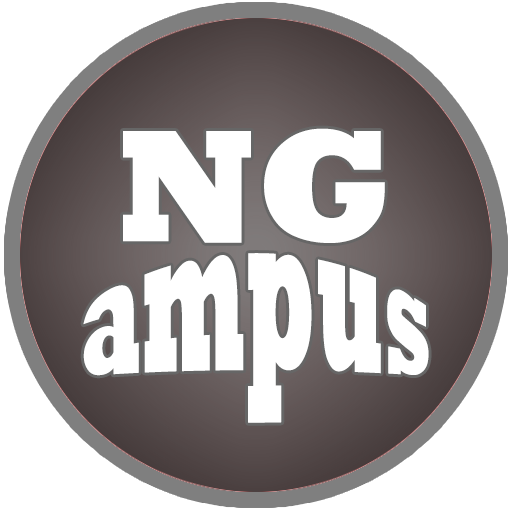
<style>
.page{position:relative;width:512px;height:512px;background:#ffffff}
.page>*{position:absolute;margin:0}
.t1{font:162.2px "Rockwell-ExtraBold";color:#ffffff}
.t2{font:135.9px "Rockwell-ExtraBold";color:#ffffff;scale:0.62 1}
</style>
<div class="page">
<p class="t1" style="left:123px;top:128px;width:262px;height:115px">NG</p>
<p class="t2" style="left:83px;top:253px;width:346px;height:170px">ampus</p>
</div>
